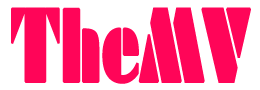
<style>
.page{position:relative;width:260px;height:90px;background:#ff0558}
.page>*{position:absolute;margin:0}
.t1{font:100.4px "FuturaBlack-BT";color:#ff0558;font-weight:bold;scale:0.75 1}
</style>
<div class="page">
<p class="t1" style="left:11px;top:7px;width:240px;height:77px">TheMV</p>
</div>
